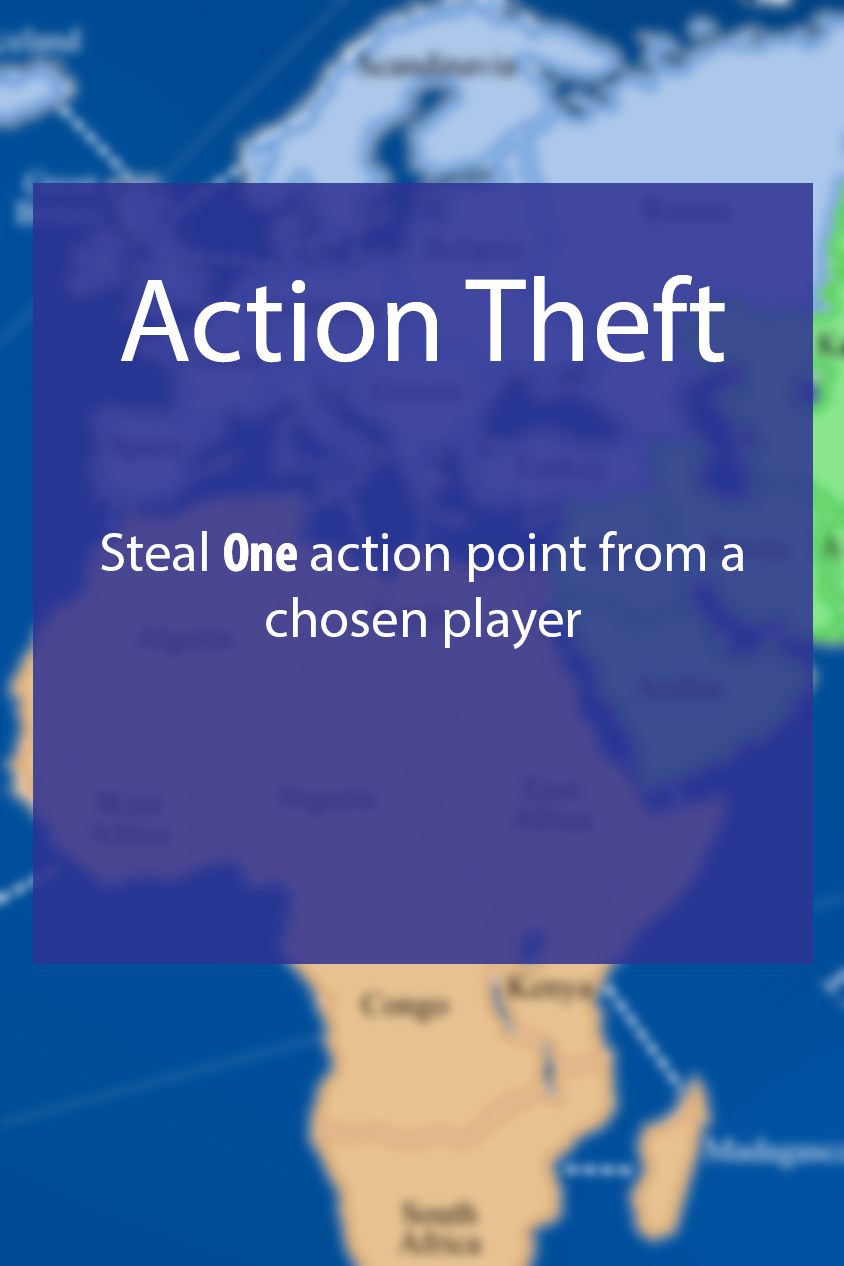
<style>
.page{position:relative;width:844px;height:1266px}
.page>*{position:absolute;margin:0}
.t1{font:55px "MyriadPro-Regular";color:#ffffff}
.t2{font:48px "MyriadPro-Regular";color:#ffffff}
.t3{font:120px "MyriadPro-Regular";color:#ffffff}
.t4{font:55px "MyriadPro-BoldCond";color:#ffffff}
</style>
<div class="page">
<p class="t1" style="left:101px;top:275px;width:643px;height:374px;text-align:center"><span class="t2"><br></span><span class="t3">Action Theft<br><br><br><br><br><br></span>Steal <span class="t4">One</span> action point from a chosen player</p>
</div>
